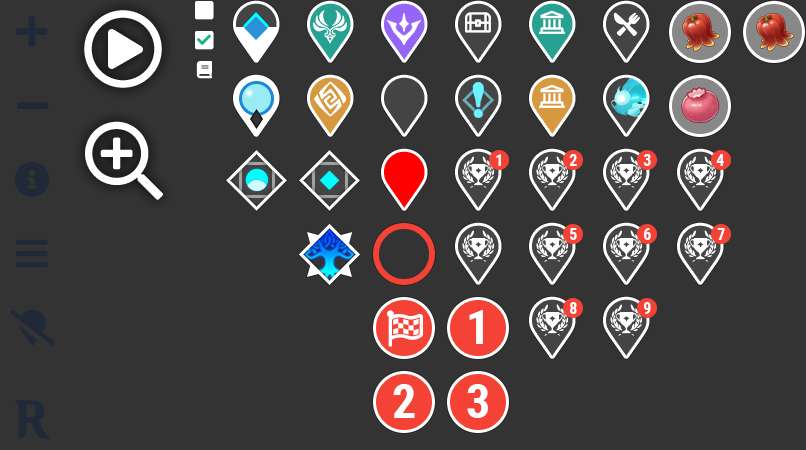
<style>
.page{position:relative;width:806px;height:450px;background:#333333}
.page>*{position:absolute;margin:0}
.t1{font:16px "RobotoCondensed-Bold";color:#ffffff;text-transform:uppercase}
.t2{font:48px "RobotoCondensed-Bold";color:#ffffff;text-transform:uppercase}
</style>
<div class="page">
<p class="t1" style="left:496px;top:154px;width:5px;height:12px">1</p>
<p class="t1" style="left:569px;top:154px;width:8px;height:12px">2</p>
<p class="t1" style="left:643px;top:154px;width:8px;height:12px">3</p>
<p class="t1" style="left:716px;top:154px;width:8px;height:12px">4</p>
<p class="t1" style="left:570px;top:228px;width:7px;height:12px">5</p>
<p class="t1" style="left:644px;top:228px;width:7px;height:12px">6</p>
<p class="t1" style="left:717px;top:228px;width:8px;height:12px">7</p>
<p class="t1" style="left:570px;top:302px;width:7px;height:12px">8</p>
<p class="t1" style="left:644px;top:302px;width:7px;height:12px">9</p>
<p class="t2" style="left:469px;top:310px;width:14px;height:34px">1</p>
<p class="t2" style="left:393px;top:384px;width:22px;height:34px">2</p>
<p class="t2" style="left:467px;top:384px;width:21px;height:34px">3</p>
</div>
